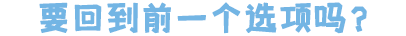
<style>
.page{position:relative;width:406px;height:36px;background:#ffffff}
.page>*{position:absolute;margin:0}
.t1{font:33.7px "shetumodengxiaofangti";color:#73b5e4;font-weight:bold}
</style>
<div class="page">
<p class="t1" style="left:39px;top:2px;width:328px;height:32px">要回到前一个选项吗？</p>
</div>
